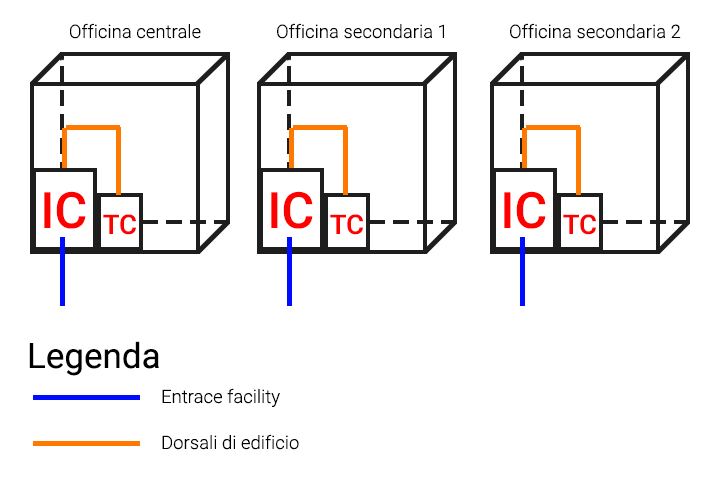
<style>
.page{position:relative;width:720px;height:480px;background:#ffffff}
.page>*{position:absolute;margin:0}
.t1{font:18.6px "Roboto-Light";color:#000000}
.t2{font:50px "Roboto-Medium";color:#ff0000}
.t3{font:26.9px "Roboto-Medium";color:#ff0000}
.t4{font:35px "Roboto-Regular";color:#000000}
</style>
<div class="page">
<p class="t1" style="left:70px;top:23px;width:131px;height:16px">Officina centrale</p>
<p class="t1" style="left:277px;top:23px;width:167px;height:16px">Officina secondaria 1</p>
<p class="t1" style="left:510px;top:23px;width:171px;height:16px">Officina secondaria 2</p>
<p class="t2" style="left:44px;top:191px;width:42px;height:38px">IC</p>
<p class="t2" style="left:271px;top:191px;width:42px;height:38px">IC</p>
<p class="t2" style="left:504px;top:191px;width:42px;height:38px">IC</p>
<p class="t3" style="left:103px;top:214px;width:33px;height:21px">TC</p>
<p class="t3" style="left:330px;top:214px;width:33px;height:21px">TC</p>
<p class="t3" style="left:563px;top:214px;width:33px;height:21px">TC</p>
<p class="t4" style="left:29px;top:341px;width:130px;height:35px">Legenda</p>
<p class="t1" style="left:162px;top:388px;width:118px;height:19px">Entrace facility</p>
<p class="t1" style="left:162px;top:434px;width:137px;height:16px">Dorsali di edificio</p>
</div>
